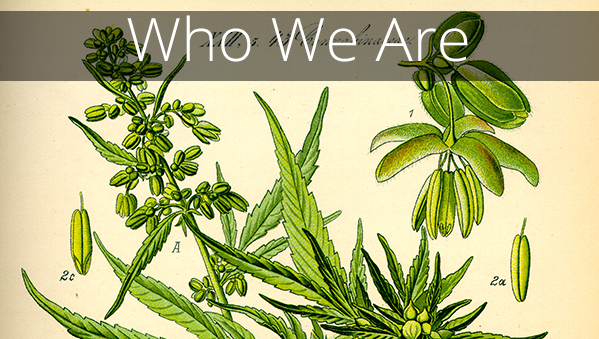
<style>
.page{position:relative;width:599px;height:339px}
.page>*{position:absolute;margin:0}
.t1{font:60px "OpenSans-Light";color:#ffffff;scale:1.03 1}
</style>
<div class="page">
<p class="t1" style="left:127px;top:15px;width:341px;height:47px">Who We Are</p>
</div>
